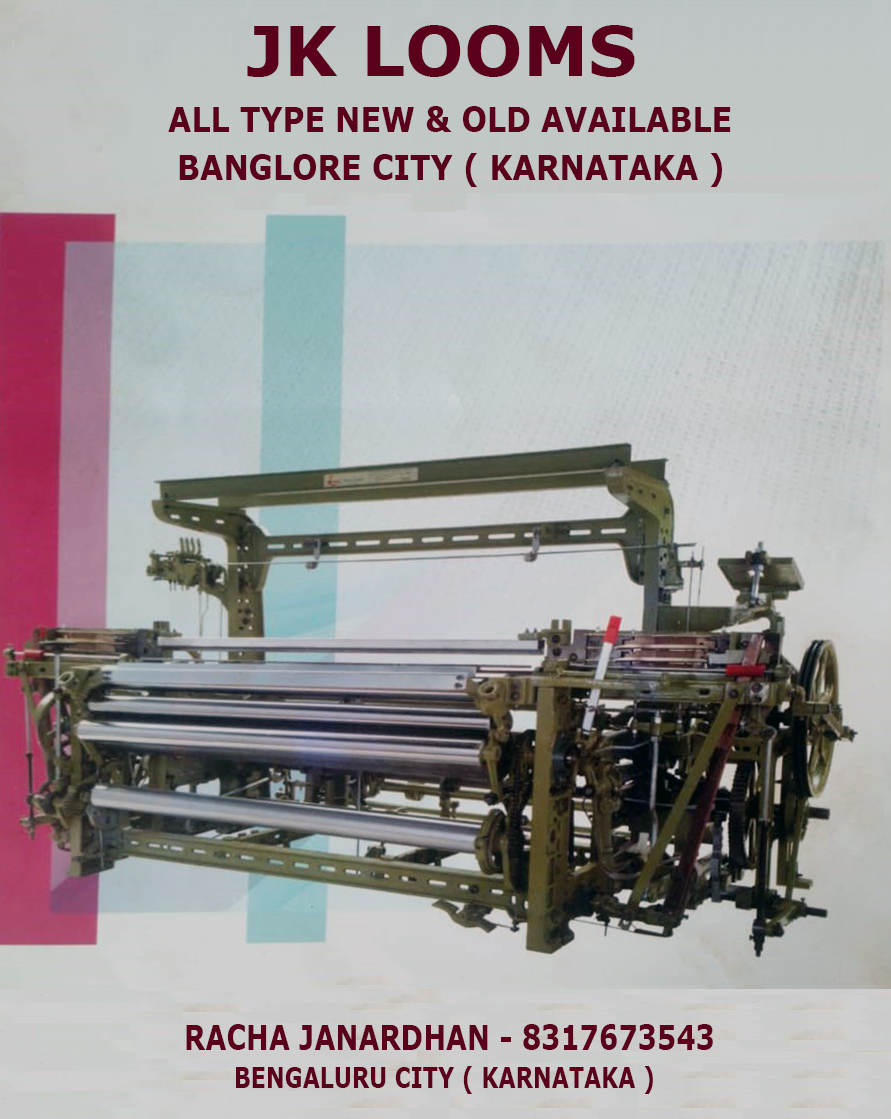
<style>
.page{position:relative;width:891px;height:1119px}
.page>*{position:absolute;margin:0}
.t1{font:69px "Verdana-Bold";color:#5a001a}
.t2{font:35.1px "Verdana-Bold";color:#5a001a;scale:0.85 1}
.t3{font:34.3px "Verdana-Bold";color:#5a001a;scale:0.79 1}
.t4{font:28.3px "Verdana-Bold";color:#5a001a;scale:0.78 1}
</style>
<div class="page">
<p class="t1" style="left:247px;top:25px;width:388px;height:52px">JK LOOMS</p>
<p class="t2" style="left:168px;top:106px;width:563px;height:26px">ALL TYPE NEW &amp; OLD AVAILABLE</p>
<p class="t2" style="left:179px;top:153px;width:543px;height:34px">BANGLORE CITY ( KARNATAKA )</p>
<p class="t3" style="left:186px;top:1024px;width:527px;height:26px">RACHA JANARDHAN - 8317673543</p>
<p class="t4" style="left:236px;top:1066px;width:417px;height:28px">BENGALURU CITY ( KARNATAKA )</p>
</div>
